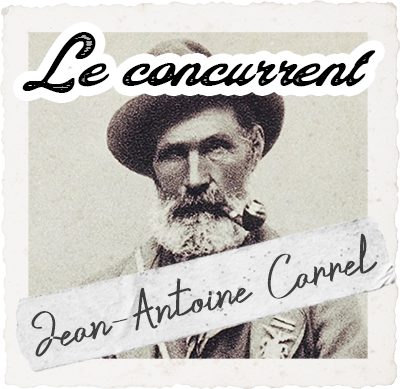
<style>
.page{position:relative;width:400px;height:389px}
.page>*{position:absolute;margin:0}
.t1{font:54.2px "ColinasPersonalUse-Regular";color:#000000}
.t2{font:53.8px "CrustaceansSignatureDEMO-Reg";color:#404040}
</style>
<div class="page">
<p class="t1" style="left:22px;top:32px;width:354px;height:61px">Le concurrent</p>
<p class="t2" style="left:31px;top:233px;width:347px;height:124px;rotate:-14deg">Jean-Antoine Carrel</p>
</div>
